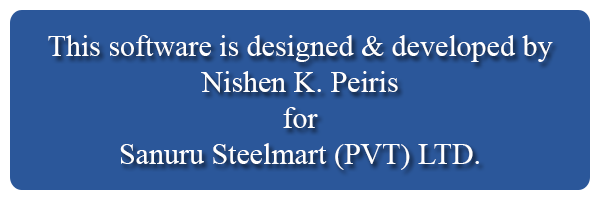
<style>
.page{position:relative;width:600px;height:200px;background:#2b579a}
.page>*{position:absolute;margin:0}
.t1{font:30px "TimesNewRomanPSMT";color:#ffffff}
</style>
<div class="page">
<p class="t1" style="left:48px;top:35px;width:505px;height:135px;text-align:center">This software is designed &amp; developed by<br>Nishen K. Peiris<br>for<br>Sanuru Steelmart (PVT) LTD.</p>
</div>
